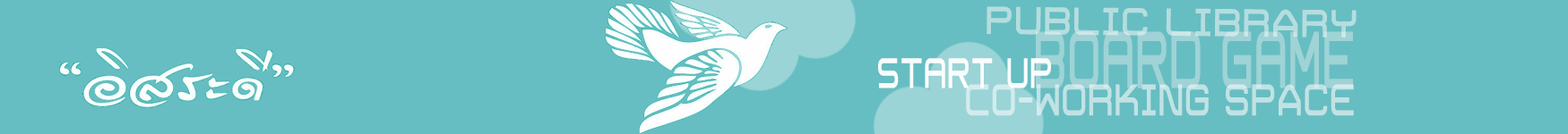
<style>
.page{position:relative;width:1568px;height:134px;background:#66bec2}
.page>*{position:absolute;margin:0}
.t1{font:40.7px "Trivial-Regular";color:#b5dddf;scale:0.9 1}
.t2{font:84.3px "Trivial-Regular";color:#9fd3d6;scale:0.5 1}
.t3{font:44.5px "Trivial-Regular";color:#ffffff;scale:0.66 1}
.t4{font:46.3px "Trivial-Regular";color:#c1e2e4;scale:0.71 1}
</style>
<div class="page">
<p class="t1" style="left:986px;top:6px;width:371px;height:32px;rotate:1deg">Public library</p>
<p class="t2" style="left:1036px;top:31px;width:317px;height:58px">BOARD GAME</p>
<p class="t3" style="left:878px;top:58px;width:173px;height:31px;opacity:0.95">START up</p>
<p class="t4" style="left:966px;top:84px;width:388px;height:32px">CO-working space</p>
</div>
